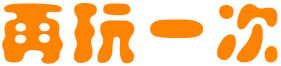
<style>
.page{position:relative;width:281px;height:66px;background:#ffffff}
.page>*{position:absolute;margin:0}
.t1{font:70px "FZPTYJW--GB1-0";color:#fd8402;font-weight:bold}
</style>
<div class="page">
<p class="t1" style="left:0px;top:1px;width:280px;height:65px">再玩一次</p>
</div>
